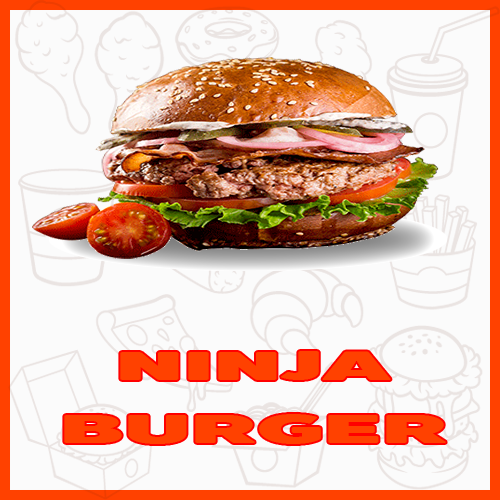
<style>
.page{position:relative;width:500px;height:500px;background:#fbfbfb}
.page>*{position:absolute;margin:0}
.t1{font:40.5px "BoonTook-Mon-Ultra";color:#ff4100;scale:2.16 1}
</style>
<div class="page">
<p class="t1" style="left:120px;top:351px;width:271px;height:29px">NINJA</p>
<p class="t1" style="left:64px;top:414px;width:382px;height:30px">BURGER</p>
</div>
